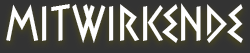
<style>
.page{position:relative;width:250px;height:53px}
.page>*{position:absolute;margin:0}
.t1{font:50px "Xtra";color:#fefefe}
</style>
<div class="page">
<p class="t1" style="left:6px;top:3px;width:237px;height:40px">Mitwirkende</p>
</div>
